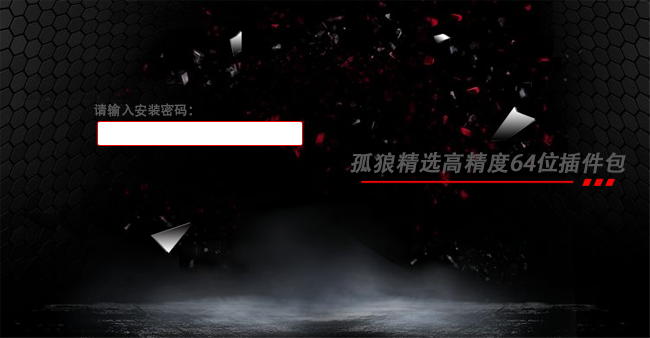
<style>
.page{position:relative;width:650px;height:338px}
.page>*{position:absolute;margin:0}
.t1{font:13.3px "AdobeHeitiStd-Regular";color:#595959}
.t2{font:22.1px "AdobeHeitiStd-Regular";color:#595959;font-weight:bold;font-style:italic}
</style>
<div class="page">
<p class="t1" style="left:94px;top:103px;width:98px;height:14px">请输入安装密码：</p>
<p class="t2" style="left:350px;top:151px;width:276px;height:23px">孤狼精选高精度64位插件包</p>
</div>
